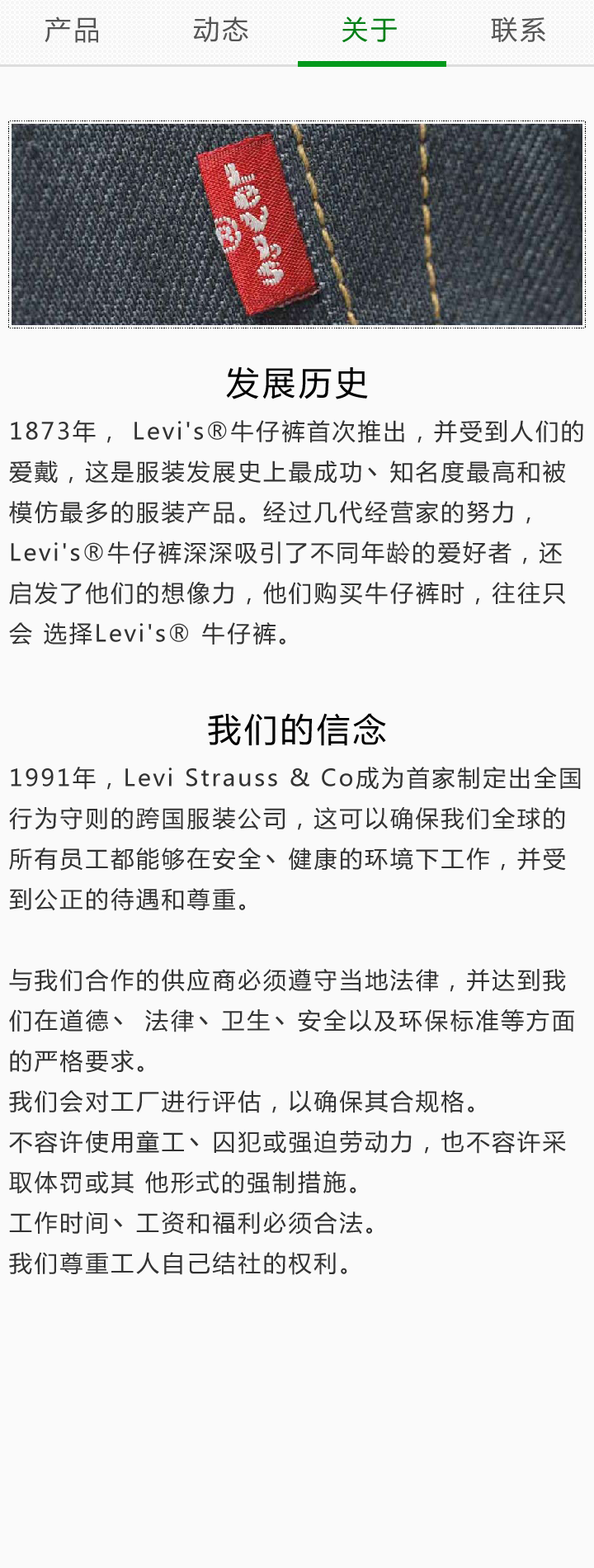
<style>
.page{position:relative;width:594px;height:1568px;background:#fafafa}
.page>*{position:absolute;margin:0}
.t1{font:26.4px "MicrosoftYaHei";letter-spacing:0.1em;color:#555555}
.t2{font:26.4px "MicrosoftYaHei";letter-spacing:0.1em;color:#028017}
.t3{font:33px "MicrosoftYaHei";letter-spacing:0.1em;color:#000000}
.t4{font:23.1px "MicrosoftYaHei";letter-spacing:0.1em;color:#333333}
</style>
<div class="page">
<p class="t1" style="left:45px;top:17px;width:53px;height:26px">产品</p>
<p class="t1" style="left:193px;top:17px;width:55px;height:26px">动态</p>
<p class="t2" style="left:342px;top:17px;width:55px;height:26px">关于</p>
<p class="t1" style="left:491px;top:17px;width:54px;height:25px">联系</p>
<p class="t3" style="left:226px;top:366px;width:142px;height:33px">发展历史</p>
<p class="t4" style="left:9px;top:420px;width:574px;height:225px">1873年， Levi's®牛仔裤首次推出，并受到人们的爱戴，这是服装发展史上最成功丶知名度最高和被模仿最多的服装产品。经过几代经营家的努力， Levi's®牛仔裤深深吸引了不同年龄的爱好者，还启发了他们的想像力，他们购买牛仔裤时，往往只会 选择Levi's® 牛仔裤。</p>
<p class="t3" style="left:208px;top:713px;width:178px;height:33px">我们的信念</p>
<p class="t4" style="left:9px;top:767px;width:572px;height:508px">1991年，Levi Strauss &amp; Co成为首家制定出全国行为守则的跨国服装公司，这可以确保我们全球的所有员工都能够在安全丶健康的环境下工作，并受到公正的待遇和尊重。 <br><br>与我们合作的供应商必须遵守当地法律，并达到我们在道德丶 法律丶卫生丶安全以及环保标准等方面的严格要求。<br>我们会对工厂进行评估，以确保其合规格。<br>不容许使用童工丶囚犯或强迫劳动力，也不容许采取体罚或其 他形式的强制措施。<br>工作时间丶工资和福利必须合法。<br>我们尊重工人自己结社的权利。</p>
</div>
